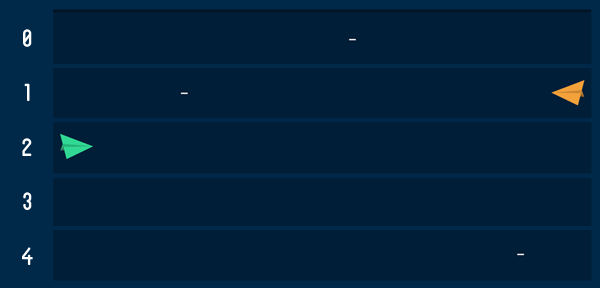
<style>
.page{position:relative;width:600px;height:288px;background:#001e37}
.page>*{position:absolute;margin:0}
.t1{font:35.1px/54.4px "Blanch-Caps";color:#ffffff}
</style>
<div class="page">
<p class="t1" style="left:22px;top:29px;width:11px;height:236px;text-align:center">0<br>1<br>2<br>3<br>4</p>
</div>
